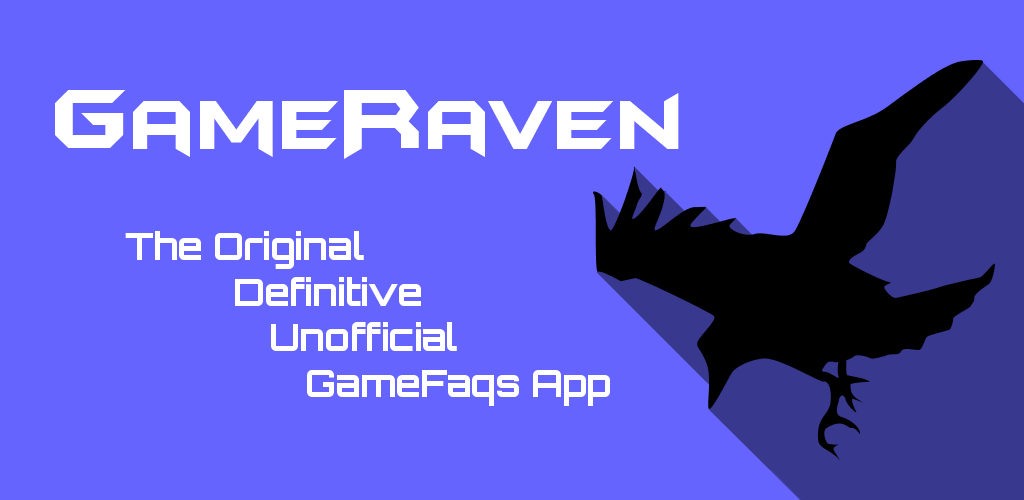
<style>
.page{position:relative;width:1024px;height:500px;background:#6564ff}
.page>*{position:absolute;margin:0}
.t1{font:80px "BatmanForeverAlternate";letter-spacing:-0.005em;color:#ffffff}
.t2{font:100px "BatmanForeverAlternate";letter-spacing:-0.005em;color:#ffffff}
.t3{font:80px "BatmanForeverAlternate";letter-spacing:0.01em;color:#ffffff}
.t4{font:38px "Orbitron-Bold";letter-spacing:-0.03em;color:#ffffff}
</style>
<div class="page">
<p class="t1" style="left:55px;top:90px;width:624px;height:69px"><span class="t2">G</span>am<span class="t3">e</span><span class="t2">R</span>aven</p>
<p class="t4" style="left:125px;top:231px;width:485px;height:175px">The Original<br>   Definitive<br>    Unofficial<br>     GameFaqs App</p>
</div>
